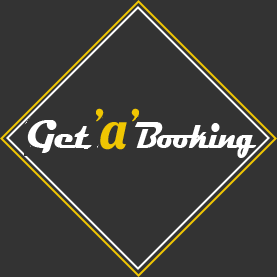
<style>
.page{position:relative;width:277px;height:277px;background:#333333}
.page>*{position:absolute;margin:0}
.t1{font:40.9px "Magneto-Bold";letter-spacing:-0.06em;color:#ffffff;scale:0.9 1}
.t2{font:38.7px "Magneto-Bold";letter-spacing:-0.06em;color:#ffffff;scale:0.8 1}
</style>
<div class="page">
<p class="t1" style="left:27px;top:120px;width:65px;height:33px">Get</p>
<p class="t2" style="left:135px;top:122px;width:122px;height:36px">Booking</p>
</div>
